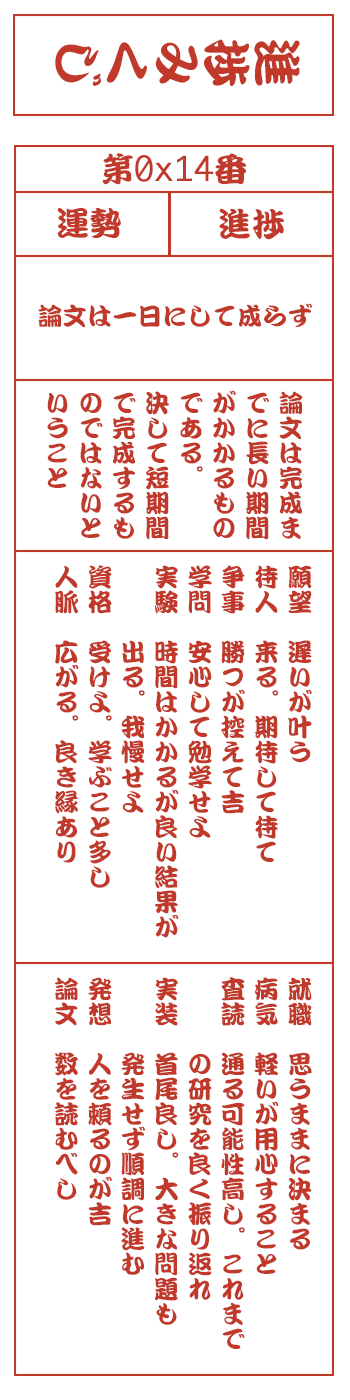
<style>
.page{position:relative;width:350px;height:1400px;background:#ffffff}
.page>*{position:absolute;margin:0}
.t1{font:50px "DFKanTeiRyu-XB-MP-RKSJ-H";color:#c0392b}
.t2{font:33.3px "Monaco";color:#c0392b}
.t3{font:33.3px "DFKanTeiRyu-XB-MP-RKSJ-H";color:#c0392b}
.t4{font:25px "DFKanTeiRyu-XB-MP-RKSJ-H";color:#c0392b}
.t5{font:25px/33.3px "DFKanTeiRyu-XB-MP-RKSJ-H";color:#c0392b}
</style>
<div class="page">
<p class="t1" style="left:55px;top:39px;width:245px;height:47px;rotate:90deg">進捗みくじ</p>
<p class="t2" style="left:102px;top:153px;width:144px;height:32px"><span class="t3">第</span>0x14<span class="t3">番</span></p>
<p class="t3" style="left:57px;top:207px;width:64px;height:31px">運勢</p>
<p class="t3" style="left:219px;top:208px;width:65px;height:32px">進捗</p>
<p class="t4" style="left:38px;top:303px;width:274px;height:25px">論文は一日にして成らず</p>
<p class="t5" style="left:47px;top:390px;width:256px;height:150px">論文は完成ま<br>でに長い期間<br>がかかるもの<br>である。<br>決して短期間<br>で完成するも<br>のではないと<br>いうこと</p>
<p class="t5" style="left:55px;top:565px;width:257px;height:373px">願望　遅いが叶う<br>待人　来る。期待して待て<br>争事　勝つが控えて吉<br>学問　安心して勉学せよ<br>実験　時間はかかるが良い結果が<br>　　　出る。我慢せよ<br>資格　受けよ。学ぶこと多し<br>人脈　広がる。良き縁あり</p>
<p class="t5" style="left:54px;top:977px;width:258px;height:372px">就職　思うままに決まる<br>病気　軽いが用心すること<br>査読　通る可能性高し。これまで<br>　　　の研究を良く振り返れ<br>実装　首尾良し。大きな問題も<br>　　　発生せず順調に進む<br>発想　人を頼るのが吉<br>論文　数を読むべし</p>
</div>
